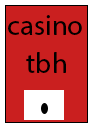
<style>
.page{position:relative;width:96px;height:128px;background:#ca1f1f}
.page>*{position:absolute;margin:0}
.t1{font:40px "MyriadArabic-Regular";color:#000000}
</style>
<div class="page">
<p class="t1" style="left:8px;top:15px;width:74px;height:20px">casino</p>
<p class="t1" style="left:26px;top:52px;width:40px;height:21px">tbh</p>
</div>
